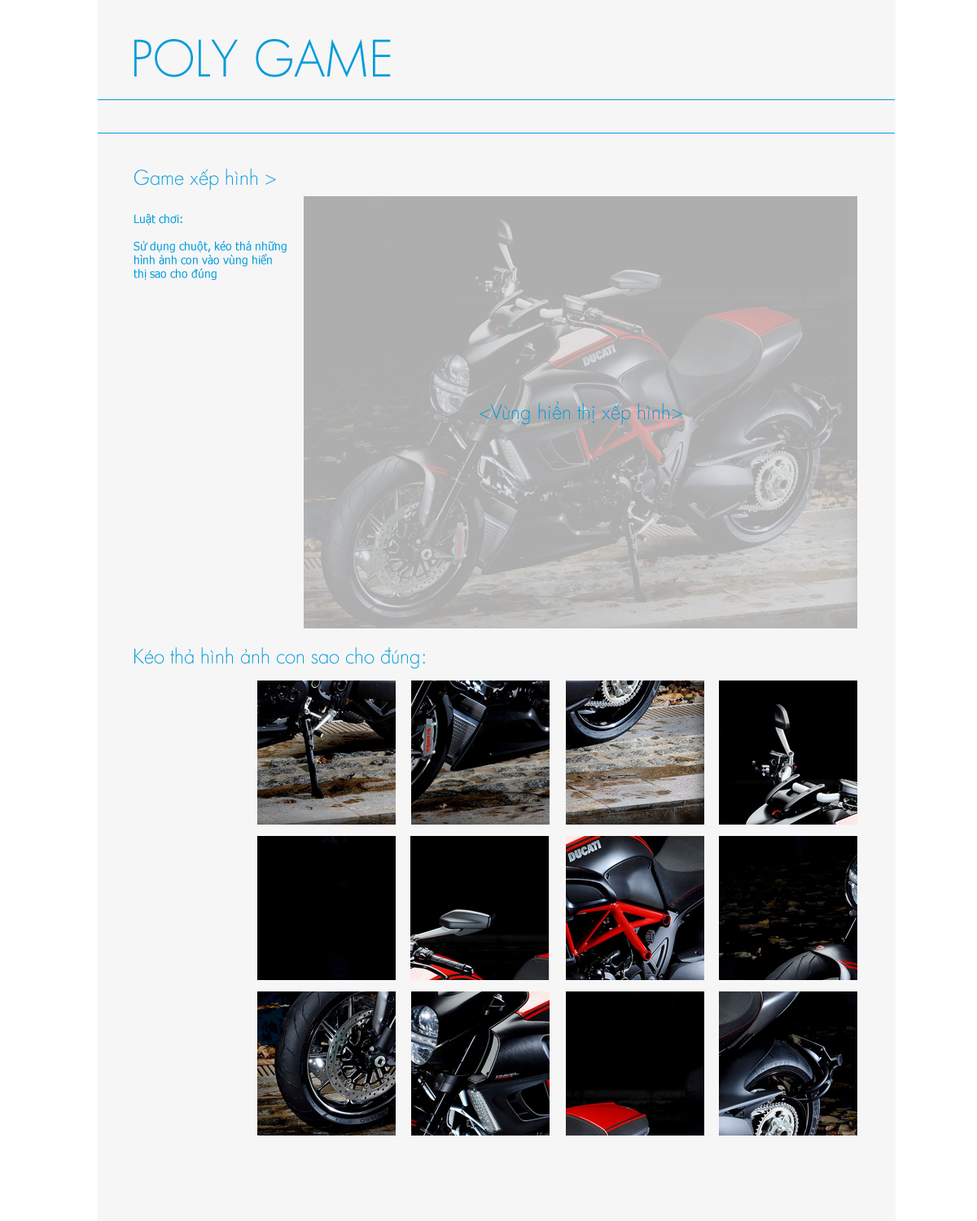
<style>
.page{position:relative;width:977px;height:1221px;background:#f6f6f6}
.page>*{position:absolute;margin:0}
.t1{font:48.8px "FuturaLt";color:#049cdb}
.t2{font:19.5px "FuturaLt";color:#049cdb}
.t3{font:11.4px "Tahoma";color:#049cdb}
</style>
<div class="page">
<p class="t1" style="left:134px;top:39px;width:257px;height:38px">POLY GAME</p>
<p class="t2" style="left:134px;top:168px;width:142px;height:22px">Game xếp hình &gt;</p>
<p class="t3" style="left:133px;top:213px;width:153px;height:67px">Luật chơi:<br><br>Sử dụng chuột, kéo thả những <br>hình ảnh con vào vùng hiển<br>thị sao cho đúng</p>
<p class="t2" style="left:479px;top:400px;width:203px;height:25px">&lt;Vùng hiển thị xếp hình&gt;</p>
<p class="t2" style="left:134px;top:647px;width:291px;height:22px">Kéo thả hình ảnh con sao cho đúng:</p>
</div>
